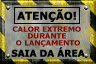
<style>
.page{position:relative;width:96px;height:64px}
.page>*{position:absolute;margin:0}
.t1{font:10.7px "Tahoma-Bold";letter-spacing:0.025em;color:#000000;scale:1.05 1}
.t2{font:7.3px/6.9px "Tahoma-Bold";letter-spacing:0.025em;color:#840804;text-transform:uppercase;scale:1.05 1}
.t3{font:9.3px "Tahoma-Bold";letter-spacing:0.025em;color:#000000;scale:1.05 1}
</style>
<div class="page">
<p class="t1" style="left:17px;top:9px;width:59px;height:13px">ATENÇÃO!</p>
<p class="t2" style="left:12px;top:26px;width:69px;height:21px;text-align:center">Calor extremo <br>durante <br>o lançamento</p>
<p class="t3" style="left:11px;top:47px;width:74px;height:10px">SAIA DA ÁREA</p>
</div>
